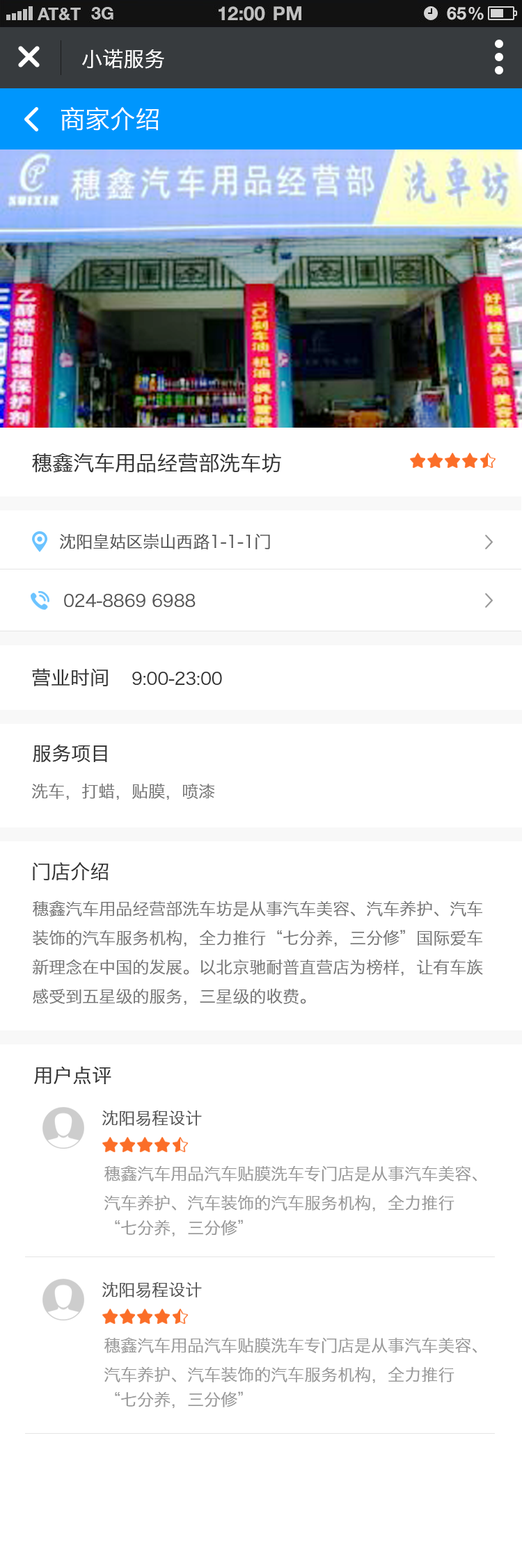
<style>
.page{position:relative;width:522px;height:1568px;background:#ffffff}
.page>*{position:absolute;margin:0}
.t1{font:20.9px "HiraginoSansGB-W3";color:#ffffff}
.t2{font:25px "HiraginoSansGB-W3";color:#ffffff}
.t3{font:20.9px "HiraginoSansGB-W3";color:#333333}
.t4{font:16.7px "HiraginoSansGB-W3";color:#555555}
.t5{font:16.7px "HiraginoSansGB-W3";color:#333333}
.t6{font:19.5px "HiraginoSansGB-W3";color:#333333}
.t7{font:16.7px "HiraginoSansGB-W3";color:#777777}
.t8{font:16.7px/25px "HiraginoSansGB-W3";color:#999999}
.t9{font:16.7px "HiraginoSansGB-W3";color:#999999}
</style>
<div class="page">
<p class="t1" style="left:82px;top:49px;width:82px;height:20px">小诺服务</p>
<p class="t2" style="left:61px;top:107px;width:98px;height:24px">商家介绍</p>
<p class="t3" style="left:32px;top:453px;width:249px;height:20px">穗鑫汽车用品经营部洗车坊</p>
<p class="t4" style="left:60px;top:533px;width:210px;height:17px">沈阳皇姑区崇山西路1-1-1门</p>
<p class="t4" style="left:64px;top:594px;width:131px;height:14px">024-8869 6988</p>
<p class="t5" style="left:32px;top:668px;width:190px;height:18px"><span class="t6">营业时间</span>    9:00-23:00</p>
<p class="t6" style="left:33px;top:744px;width:74px;height:19px">服务项目</p>
<p class="t7" style="left:32px;top:783px;width:183px;height:17px">洗车，打蜡，贴膜，喷漆</p>
<p class="t6" style="left:33px;top:862px;width:75px;height:18px">门店介绍</p>
<p class="t7" style="left:33px;top:900px;width:450px;height:105px">穗鑫汽车用品经营部洗车坊是从事汽车美容、汽车养护、汽车<br>装饰的汽车服务机构，全力推行“七分养，三分修”国际爱车<br>新理念在中国的发展。以北京驰耐普直营店为榜样，让有车族<br>感受到五星级的服务，三星级的收费。</p>
<p class="t6" style="left:34px;top:1066px;width:77px;height:19px">用户点评</p>
<p class="t4" style="left:102px;top:1110px;width:100px;height:16px">沈阳易程设计</p>
<p class="t8" style="left:104px;top:1165px;width:373px;height:71px"><span class="t9">穗鑫汽车用品</span>汽车贴膜洗车专门店是从事汽车美容、<br>汽车养护、汽车装饰的汽车服务机构，全力推行<br>“七分养，三分修”</p>
<p class="t4" style="left:102px;top:1282px;width:100px;height:16px">沈阳易程设计</p>
<p class="t8" style="left:104px;top:1337px;width:373px;height:71px"><span class="t9">穗鑫汽车用品</span>汽车贴膜洗车专门店是从事汽车美容、<br>汽车养护、汽车装饰的汽车服务机构，全力推行<br>“七分养，三分修”</p>
</div>
